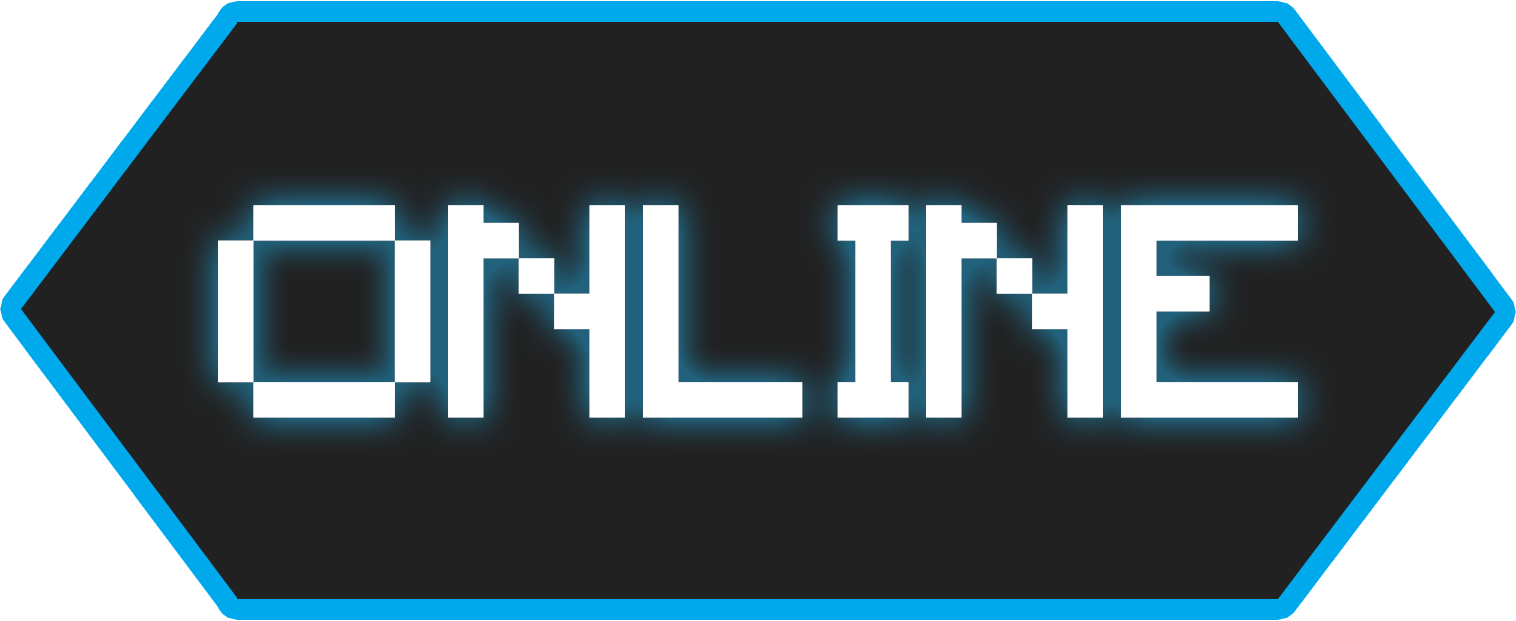
<style>
.page{position:relative;width:1516px;height:621px;background:#212121}
.page>*{position:absolute;margin:0}
.t1{font:283.3px "Minecraft";color:#ffffff}
</style>
<div class="page">
<p class="t1" style="left:218px;top:205px;width:1080px;height:213px">ONLINE</p>
</div>
